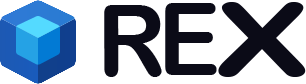
<style>
.page{position:relative;width:306px;height:84px;background:#ffffff}
.page>*{position:absolute;margin:0}
.t1{font:99.6px "ArialRoundedMTBold";color:#0b0b17;scale:0.96 1}
.t2{font:101.5px "ArialRoundedMTBold";color:#0b0b17;scale:0.92 1}
.t3{font:102px "ArialRoundedMTBold";color:#0b0b17;scale:1.5 1}
</style>
<div class="page">
<p class="t1" style="left:104px;top:5px;width:58px;height:72px">R</p>
<p class="t2" style="left:165px;top:3px;width:52px;height:72px">E</p>
<p class="t3" style="left:218px;top:2px;width:88px;height:75px">X</p>
</div>
